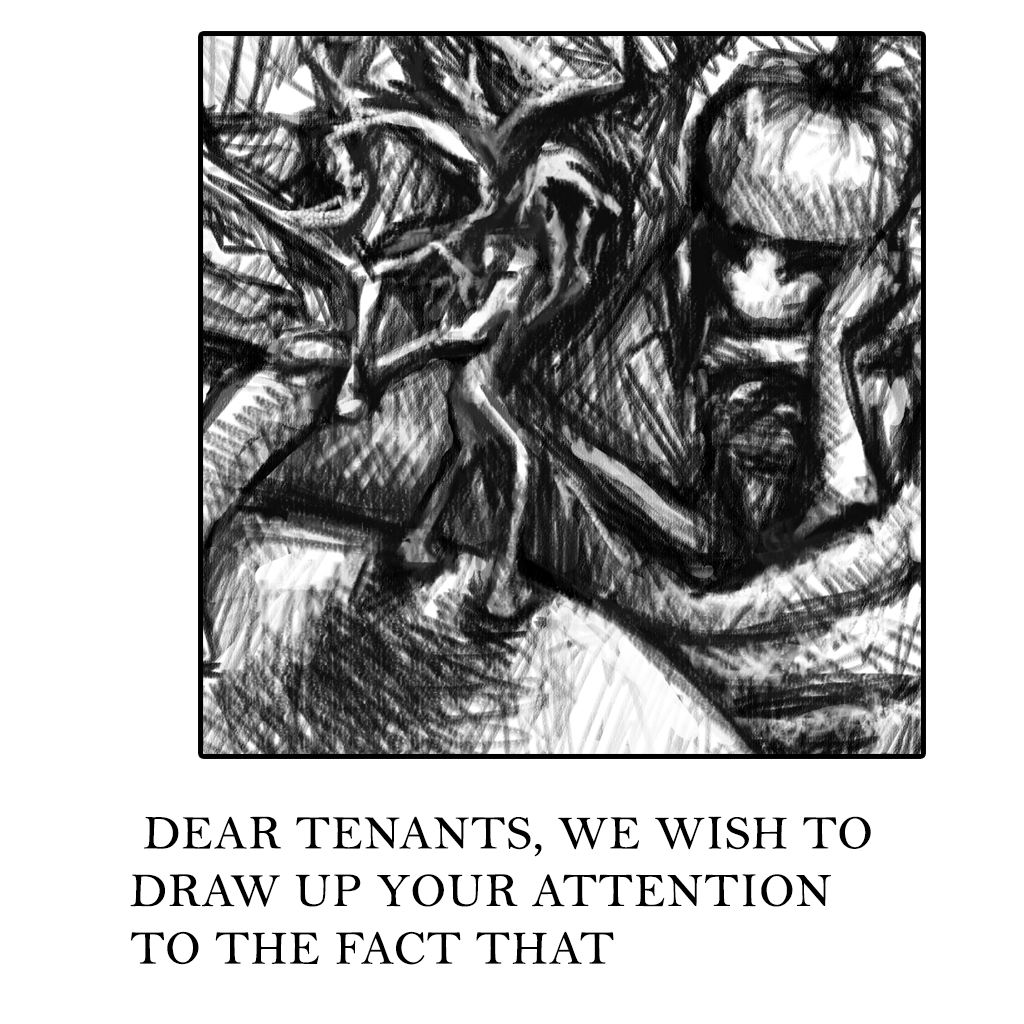
<style>
.page{position:relative;width:1024px;height:1024px;background:#ffffff}
.page>*{position:absolute;margin:0}
.t1{font:48px "BellMT";color:#000000;font-weight:bold}
</style>
<div class="page">
<p class="t1" style="left:130px;top:816px;width:741px;height:149px;text-align:right">DEAR TENANTS, WE WISH TO <br>DRAW UP YOUR ATTENTION<br> TO THE FACT THAT</p>
</div>
